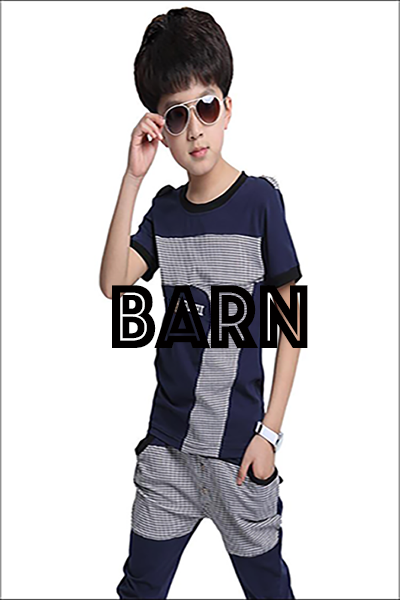
<style>
.page{position:relative;width:400px;height:600px;background:#ffffff}
.page>*{position:absolute;margin:0}
.t1{font:94.3px "Phosphate-Inline";color:#020000;scale:0.89 1}
</style>
<div class="page">
<p class="t1" style="left:112px;top:285px;width:196px;height:63px">BARN</p>
</div>
